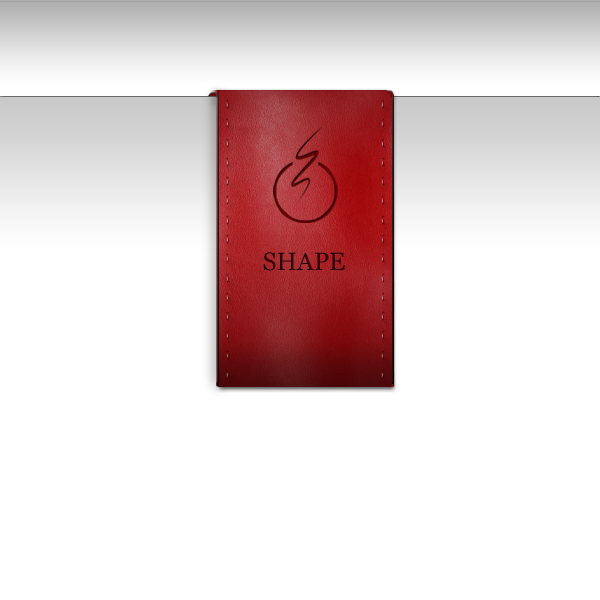
<style>
.page{position:relative;width:600px;height:600px;background:#ffffff}
.page>*{position:absolute;margin:0}
.t1{font:25px "Georgia";color:#320304}
</style>
<div class="page">
<p class="t1" style="left:263px;top:252px;width:82px;height:19px">SHAPE</p>
</div>
